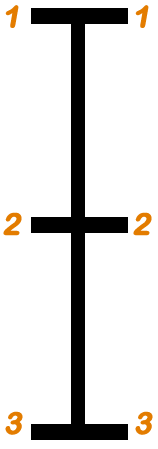
<style>
.page{position:relative;width:158px;height:449px;background:#ffffff}
.page>*{position:absolute;margin:0}
.t1{font:30px "ArialRoundedMTBold";color:#e37c00;font-weight:bold;font-style:italic}
</style>
<div class="page">
<p class="t1" style="left:5px;top:5px;width:14px;height:23px">1</p>
<p class="t1" style="left:135px;top:5px;width:14px;height:23px">1</p>
<p class="t1" style="left:3px;top:212px;width:19px;height:24px">2</p>
<p class="t1" style="left:133px;top:212px;width:19px;height:24px">2</p>
<p class="t1" style="left:5px;top:411px;width:18px;height:24px">3</p>
<p class="t1" style="left:135px;top:411px;width:18px;height:24px">3</p>
</div>
